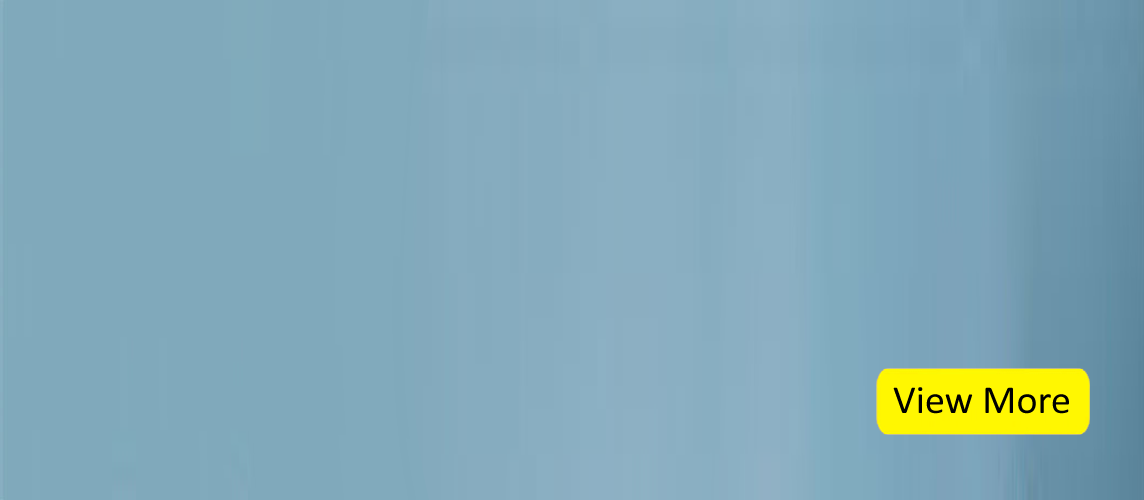
<style>
.page{position:relative;width:1144px;height:500px;background:#80a9bb}
.page>*{position:absolute;margin:0}
.t1{font:40px "Calibri";color:#000000}
</style>
<div class="page">
<p class="t1" style="left:893px;top:387px;width:176px;height:27px">View More</p>
</div>
